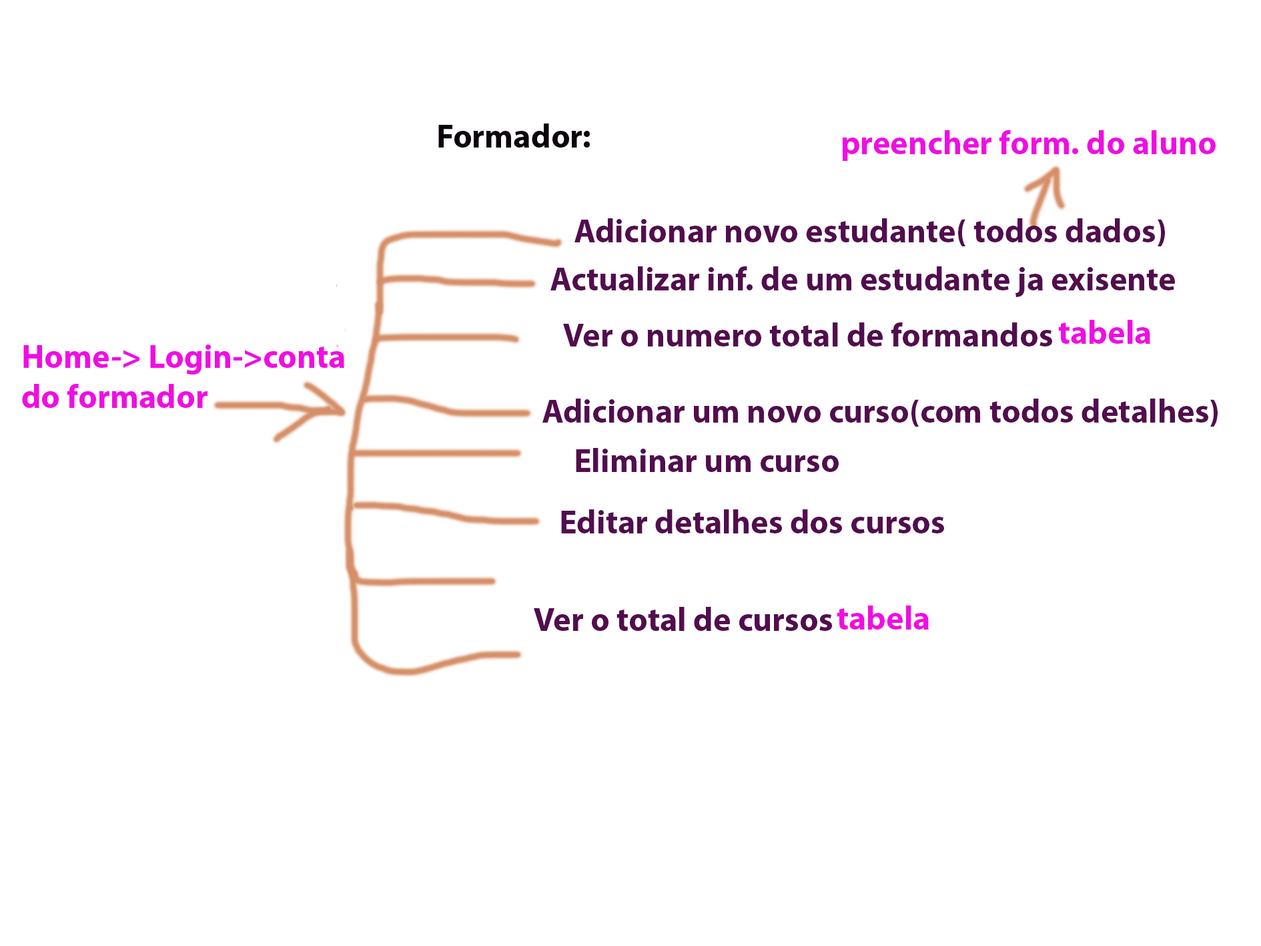
<style>
.page{position:relative;width:1261px;height:946px;background:#ffffff}
.page>*{position:absolute;margin:0}
.t1{font:33.4px "MyriadPro-Bold";color:#f00de3}
.t2{font:33.4px "MyriadPro-Bold";color:#520d4e}
</style>
<div class="page">
<p class="t1" style="left:842px;top:130px;width:374px;height:31px">preencher form. do aluno</p>
<p class="t2" style="left:575px;top:218px;width:590px;height:28px">Adicionar novo estudante( todos dados)</p>
<p class="t2" style="left:550px;top:266px;width:625px;height:31px">Actualizar inf. de um estudante ja exisente</p>
<p class="t2" style="left:563px;top:322px;width:489px;height:24px">Ver o numero total de formandos</p>
<p class="t1" style="left:1058px;top:320px;width:92px;height:24px">tabela</p>
<p class="t2" style="left:542px;top:398px;width:676px;height:28px">Adicionar um novo curso(com todos detalhes)</p>
<p class="t2" style="left:576px;top:448px;width:263px;height:24px">Eliminar um curso</p>
<p class="t2" style="left:561px;top:509px;width:383px;height:24px">Editar detalhes dos cursos</p>
<p class="t1" style="left:837px;top:605px;width:92px;height:24px">tabela</p>
</div>
